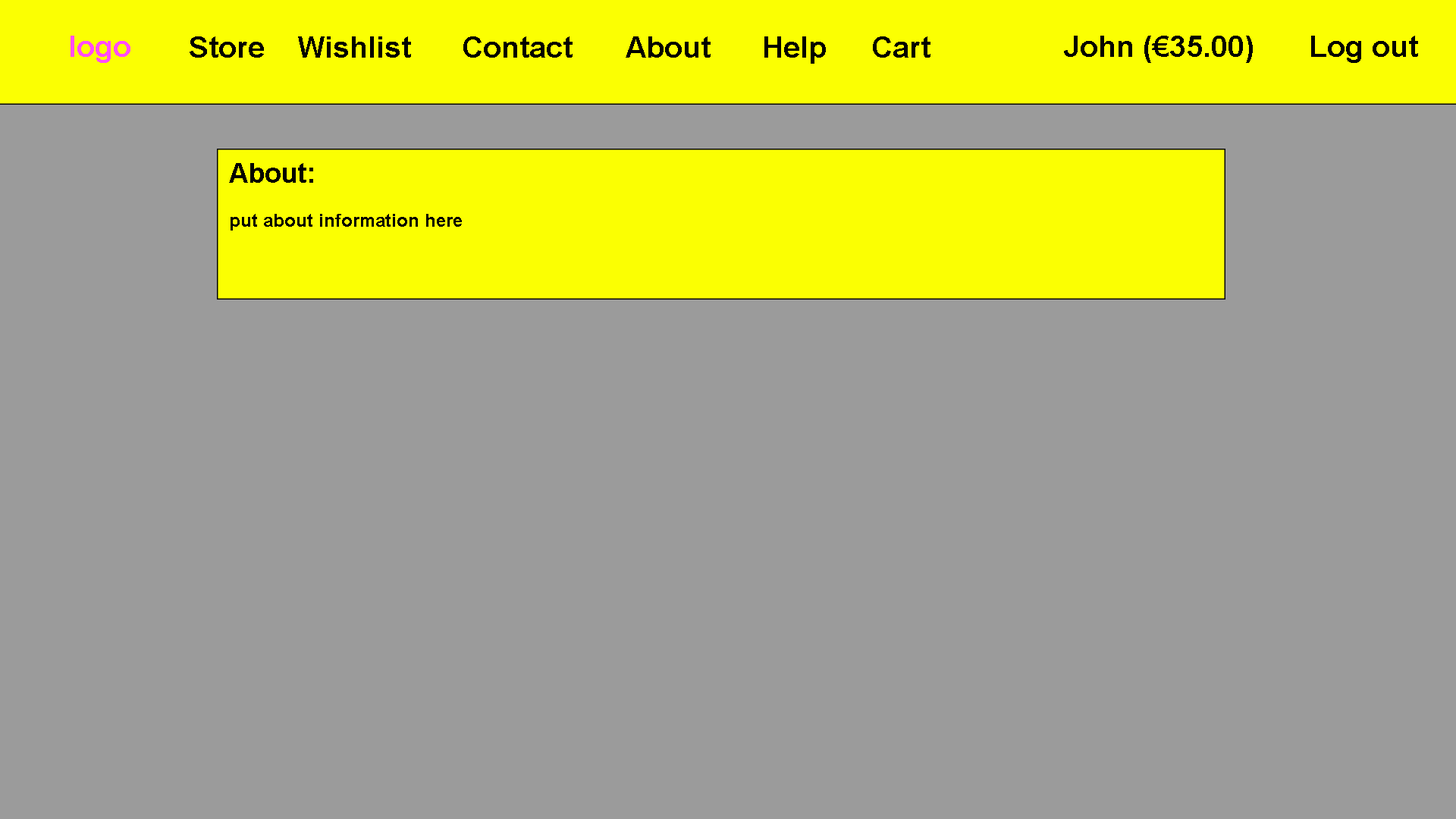
<style>
.page{position:relative;width:1456px;height:819px;background:#9b9b9b}
.page>*{position:absolute;margin:0}
.t1{font:29.6px "Arial-BoldMT";color:#ff4cff}
.t2{font:29.6px "Arial-BoldMT";color:#000000}
.t3{font:29.6px "Arial-BoldMT";color:#010101}
.t4{font:18.2px "Arial-BoldMT";color:#010101}
.t5{font:27.3px "Arial-BoldMT";color:#010101}
</style>
<div class="page">
<p class="t1" style="left:71px;top:36px;width:59px;height:27px">logo</p>
<p class="t2" style="left:190px;top:36px;width:740px;height:28px">Store  Wishlist  Contact  About  Help  Cart</p>
<p class="t3" style="left:1064px;top:36px;width:354px;height:27px">John (€35.00)  Log out</p>
<p class="t4" style="left:229px;top:163px;width:233px;height:68px"><span class="t5">About:<br></span><br>put about information here</p>
</div>
